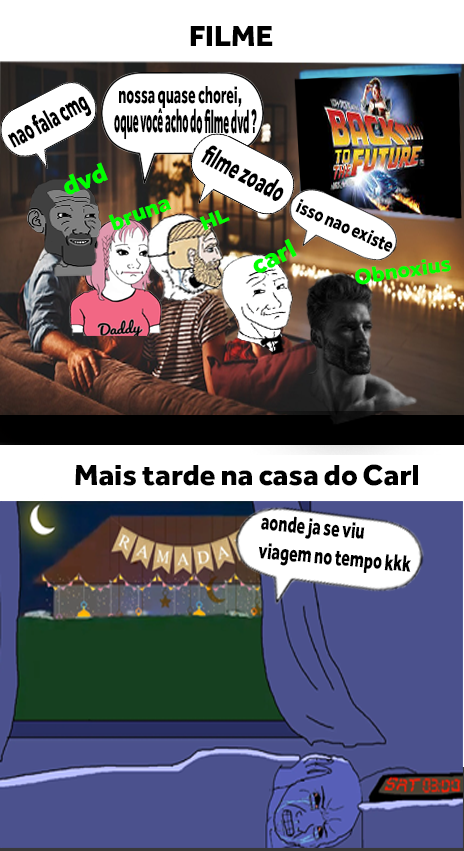
<style>
.page{position:relative;width:464px;height:851px;background:#ffffff}
.page>*{position:absolute;margin:0}
.t1{font:30px "EffraHeavy-Regular";color:#000000}
.t2{font:25.4px "EffraHeavy-Regular";color:#000000;scale:0.56 1}
.t3{font:30px "EffraHeavy-Regular";color:#000000;scale:0.52 1}
.t4{font:35px "EffraHeavy-Regular";color:#000000;scale:0.31 1}
.t5{font:30px "EffraHeavy-Regular";color:#000000;scale:0.58 1}
.t6{font:27.4px "EffraHeavy-Regular";color:#00ff00}
.t7{font:20.4px "EffraHeavy-Regular";color:#000000;scale:0.78 1}
.t8{font:23.9px "EffraHeavy-Regular";color:#00ff00}
.t9{font:20.9px "EffraHeavy-Regular";color:#00ff00;scale:1.08 1}
.t10{font:27.8px "EffraHeavy-Regular";color:#00ff00}
.t11{font:22.7px "EffraHeavy-Regular";color:#00ff00}
.t12{font:23.8px "EffraHeavy-Regular";color:#000000;scale:0.67 1}
</style>
<div class="page">
<p class="t1" style="left:190px;top:26px;width:83px;height:20px">FILME</p>
<p class="t2" style="left:119px;top:86px;width:123px;height:22px">nossa quase chorei,</p>
<p class="t3" style="left:7px;top:96px;width:85px;height:52px;rotate:-28deg">nao fala cmg</p>
<p class="t4" style="left:114px;top:108px;width:143px;height:32px">oque você acho do filme dvd ?</p>
<p class="t5" style="left:200px;top:145px;width:84px;height:56px;rotate:28deg">filme zoado</p>
<p class="t6" style="left:64px;top:162px;width:44px;height:33px;rotate:-22deg">dvd</p>
<p class="t7" style="left:295px;top:198px;width:98px;height:54px;rotate:24deg">isso nao existe</p>
<p class="t8" style="left:108px;top:199px;width:64px;height:31px;rotate:-21deg">bruna</p>
<p class="t9" style="left:199px;top:210px;width:31px;height:21px;rotate:-24deg">HL</p>
<p class="t10" style="left:253px;top:238px;width:44px;height:35px;rotate:-26deg">carl</p>
<p class="t11" style="left:355px;top:259px;width:96px;height:26px;rotate:-8deg">Obnoxius</p>
<p class="t1" style="left:75px;top:464px;width:343px;height:22px">Mais tarde na casa do Carl</p>
<p class="t12" style="left:259px;top:516px;width:152px;height:57px;rotate:5deg">aonde ja se viu<br>viagem no tempo kkk</p>
</div>
